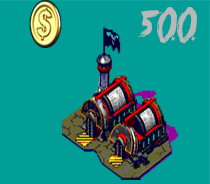
<style>
.page{position:relative;width:210px;height:184px;background:#009e96}
.page>*{position:absolute;margin:0}
.t1{font:44.8px "LeviBrush";color:#b8b8b8;scale:0.68 1}
</style>
<div class="page">
<p class="t1" style="left:138px;top:7px;width:59px;height:37px">500</p>
</div>
